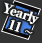
<style>
.page{position:relative;width:42px;height:43px;background:#333333}
.page>*{position:absolute;margin:0}
.t1{font:13px/14px "RyuminPro-ExBold";letter-spacing:-0.08em;color:#ffffff;font-weight:bold}
.t2{font:13px/14px "RyuminPro-ExBold";color:#ffffff;font-weight:bold}
.t3{font:13px/14px "TimesNewRomanPSMT";color:#ffffff;font-weight:bold}
</style>
<div class="page">
<p class="t1" style="left:3px;top:2px;width:36px;height:32px;text-align:center;rotate:19deg">Yearly<br><span class="t2">  11 </span><span class="t3">~</span></p>
</div>
